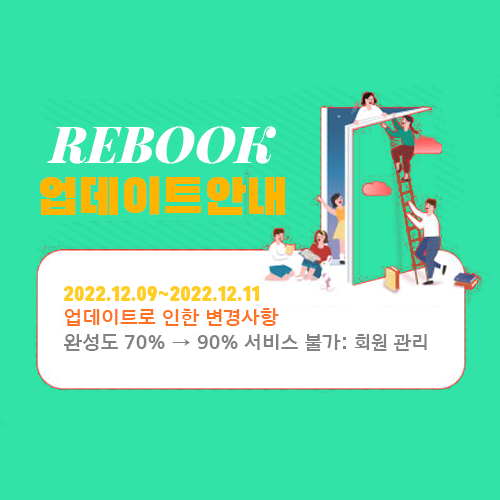
<style>
.page{position:relative;width:500px;height:500px;background:#31e3a7}
.page>*{position:absolute;margin:0}
.t1{font:50px/50px "PlayfairDisplay-BlackItalic";color:#ffffff}
.t2{font:50px/50px "BlackHanSans";color:#ffb400}
.t3{font:20px/25px "BlackHanSans";color:#ffce23}
.t4{font:20px/25px "Arita-dotum-Bold_TTF";color:#ff7123}
.t5{font:20px/25px "Arita-dotum-Bold_TTF";color:#828282}
.t6{font:19px/25px "Arita-dotum-Bold_TTF";color:#828282}
</style>
<div class="page">
<p class="t1" style="left:40px;top:126px;width:245px;height:89px;text-align:center">REBOOK<br><span class="t2">업데이트안내</span></p>
<p class="t3" style="left:64px;top:286px;width:363px;height:65px">2022.12.09~2022.12.11<br><span class="t4">업데이트로 인한 변경사항<br></span><span class="t5">완성도 70% → 90% 서비스 불가: </span><span class="t6">회원 관리</span></p>
</div>
